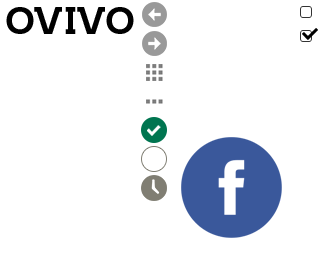
<style>
.page{position:relative;width:318px;height:261px;background:#ffffff}
.page>*{position:absolute;margin:0}
.t1{font:37.9px "KontrapunktBob-Bold";color:#000000;text-transform:uppercase}
</style>
<div class="page">
<p class="t1" style="left:6px;top:7px;width:128px;height:27px">ovivo</p>
</div>
